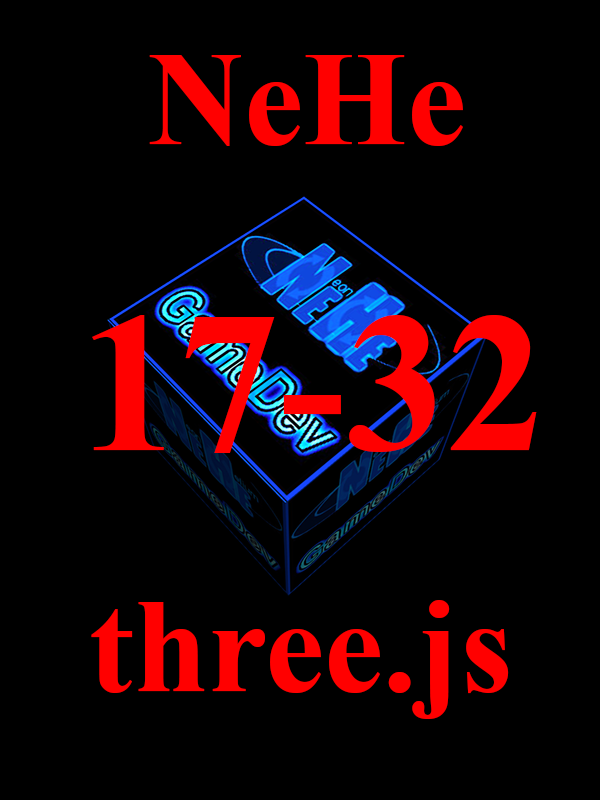
<style>
.page{position:relative;width:600px;height:800px;background:#000000}
.page>*{position:absolute;margin:0}
.t1{font:133.3px "TimesNewRomanPS-BoldMT";color:#ff0000}
.t2{font:200px "TimesNewRomanPS-BoldMT";color:#ff0000}
</style>
<div class="page">
<p class="t1" style="left:149px;top:55px;width:314px;height:91px">NeHe</p>
<p class="t2" style="left:92px;top:315px;width:445px;height:138px">17-32</p>
<p class="t1" style="left:91px;top:600px;width:418px;height:119px">three.js</p>
</div>
